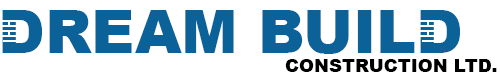
<style>
.page{position:relative;width:500px;height:75px;background:#ffffff}
.page>*{position:absolute;margin:0}
.t1{font:60px "Arial-Black";color:#0b6299}
.t2{font:18px "Arial-Black";color:#000000}
</style>
<div class="page">
<p class="t1" style="left:2px;top:10px;width:458px;height:44px">DREAM BUILD</p>
<p class="t2" style="left:285px;top:59px;width:212px;height:13px">CONSTRUCTION LTD.</p>
</div>
